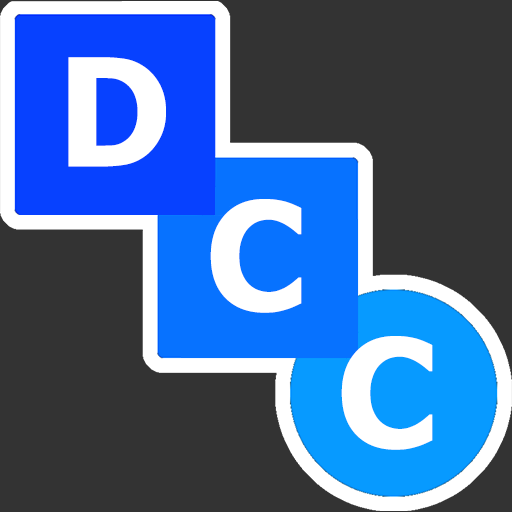
<style>
.page{position:relative;width:512px;height:512px;background:#333333}
.page>*{position:absolute;margin:0}
.t1{font:150px "Tahoma-Bold";color:#ffffff}
</style>
<div class="page">
<p class="t1" style="left:68px;top:57px;width:98px;height:110px">D</p>
<p class="t1" style="left:210px;top:199px;width:92px;height:114px">C</p>
<p class="t1" style="left:341px;top:336px;width:92px;height:114px">C</p>
</div>
